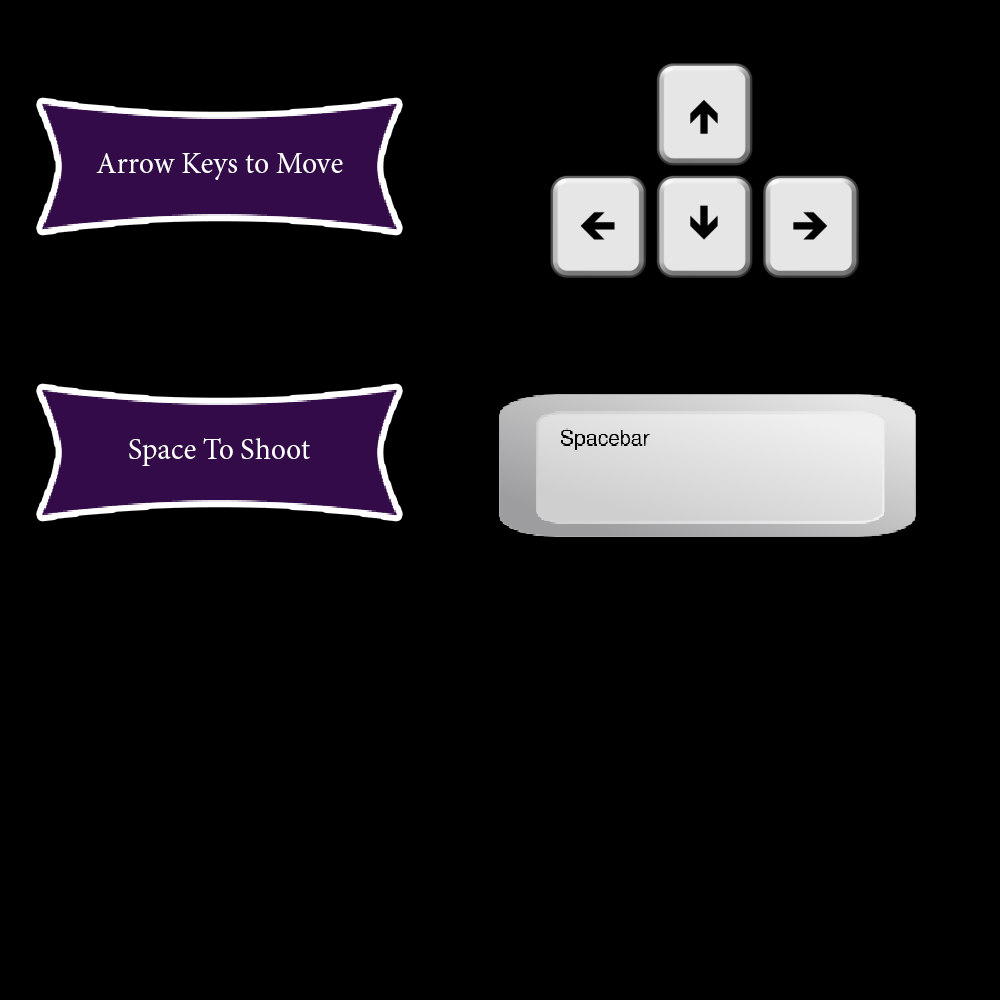
<style>
.page{position:relative;width:1000px;height:1000px;background:#000000}
.page>*{position:absolute;margin:0}
.t1{font:30px "MinionPro-Regular";color:#ffffff}
</style>
<div class="page">
<p class="t1" style="left:96px;top:153px;width:247px;height:27px">Arrow Keys to Move</p>
<p class="t1" style="left:129px;top:438px;width:181px;height:28px">Space To Shoot</p>
</div>
